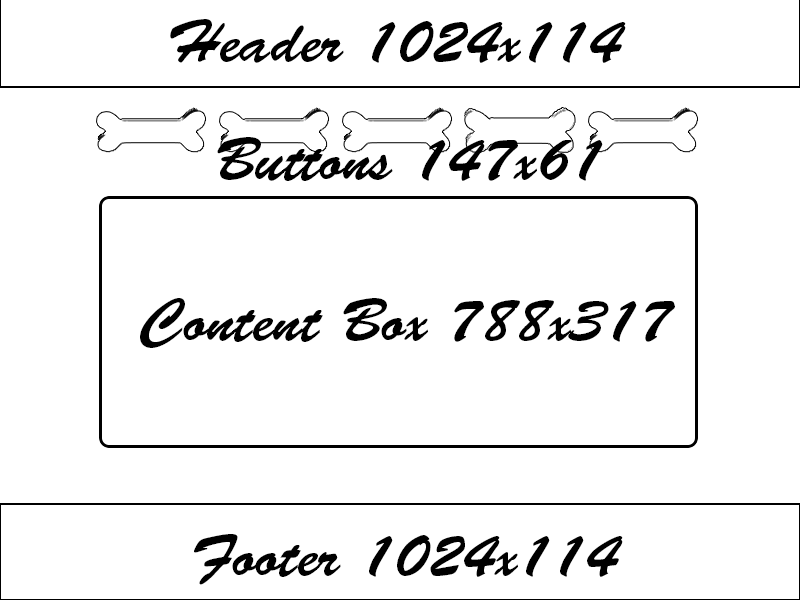
<style>
.page{position:relative;width:800px;height:600px;background:#ffffff}
.page>*{position:absolute;margin:0}
.t1{font:60px "BrushScriptStd";color:#000000}
</style>
<div class="page">
<p class="t1" style="left:170px;top:19px;width:456px;height:44px">Header 1024x114</p>
<p class="t1" style="left:217px;top:137px;width:386px;height:44px">Buttons 147x61</p>
<p class="t1" style="left:140px;top:298px;width:535px;height:50px">Content Box 788x317</p>
<p class="t1" style="left:194px;top:534px;width:429px;height:51px">Footer 1024x114</p>
</div>
